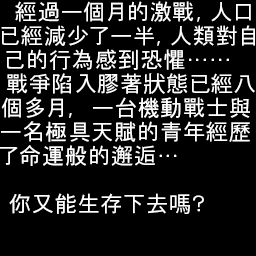
<style>
.page{position:relative;width:256px;height:256px;background:#000000}
.page>*{position:absolute;margin:0}
.t1{font:22px "HeiseiKakuGoStd-W3";letter-spacing:0.04em;color:#ffffff}
.t2{font:22px "KozGoPr6N-Regular";letter-spacing:0.04em;color:#ffffff}
.t3{font:20.7px "PingFangSC-Regular";letter-spacing:0.03em;color:#ffffff;scale:1.06 1}
</style>
<div class="page">
<p class="t1" style="left:15px;top:1px;width:236px;height:21px">經過一個月的激戰, 人口</p>
<p class="t1" style="left:1px;top:25px;width:254px;height:21px">已經減少了一半, 人類對自</p>
<p class="t1" style="left:6px;top:49px;width:223px;height:21px">己的行為感到恐懼……</p>
<p class="t1" style="left:7px;top:73px;width:248px;height:21px">戰爭陷入膠著<span class="t2">狀</span>態已經八</p>
<p class="t1" style="left:1px;top:97px;width:249px;height:22px">個多月,  一台機動戰士與</p>
<p class="t1" style="left:1px;top:121px;width:249px;height:21px">一名極具天賦的青年經<span class="t2">歷</span></p>
<p class="t1" style="left:0px;top:145px;width:177px;height:21px">了命運般的邂逅…</p>
<p class="t1" style="left:9px;top:193px;width:195px;height:21px"><span class="t3">你</span>又能生存下去<span class="t2">嗎</span>？</p>
</div>
